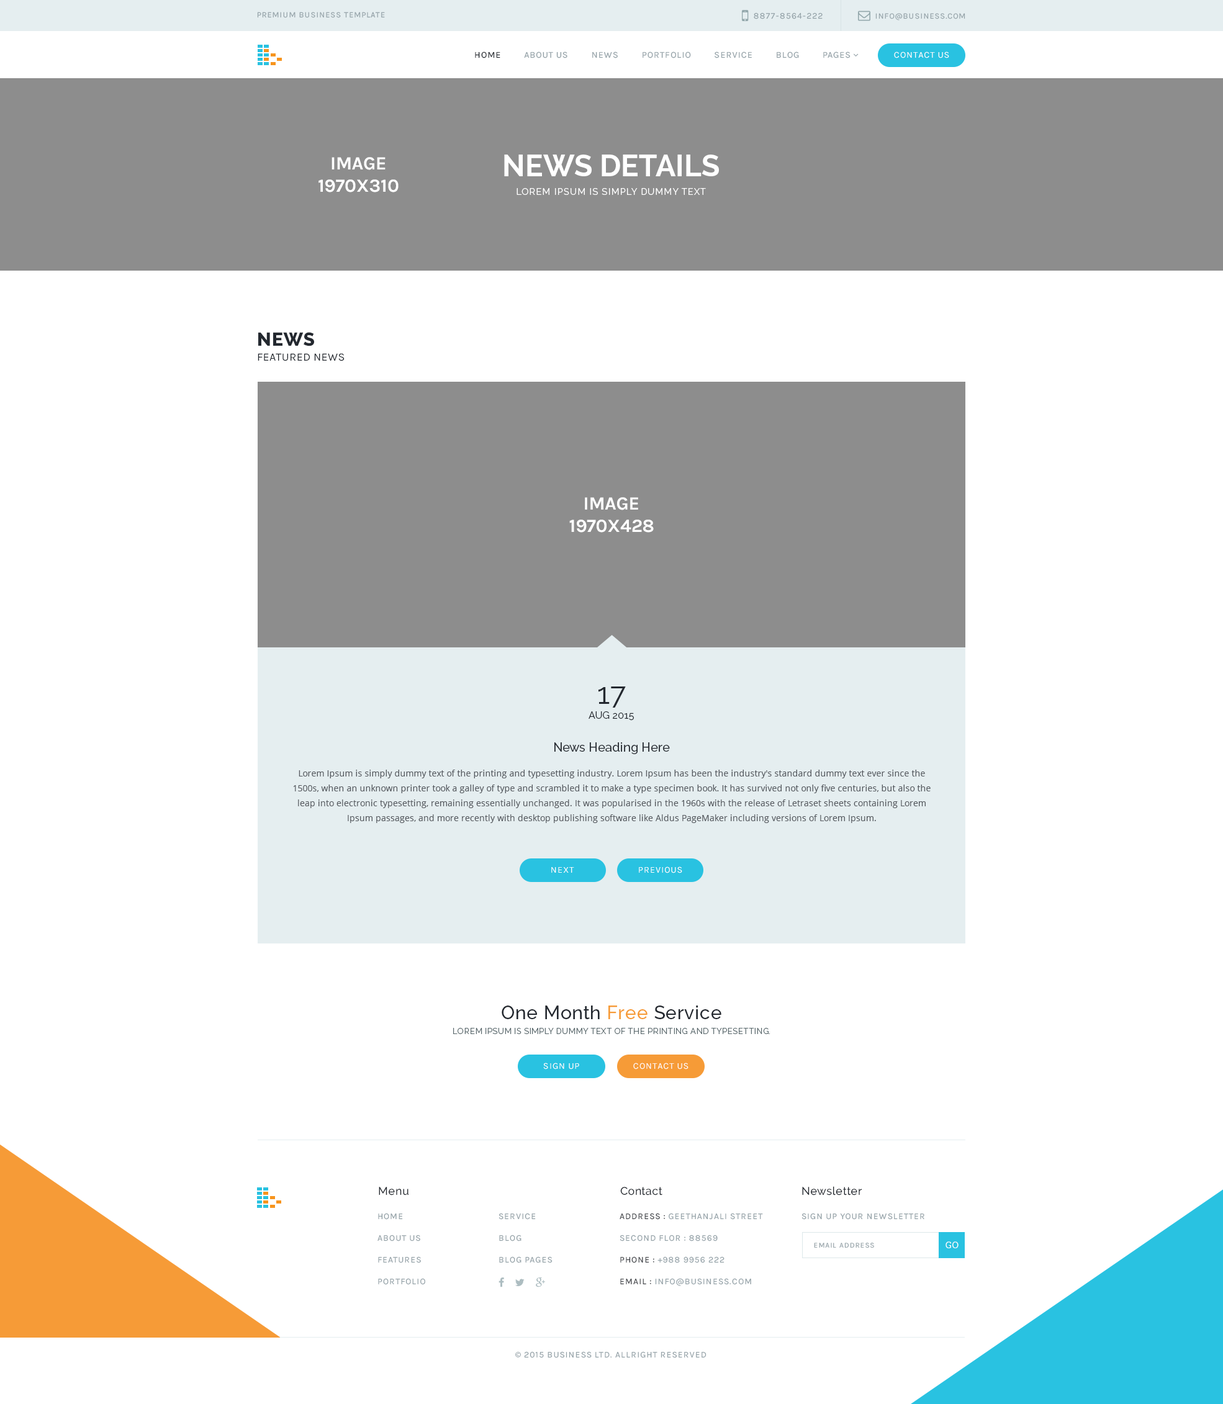
<style>
.page{position:relative;width:1223px;height:1404px;background:#ffffff}
.page>*{position:absolute;margin:0}
.t1{font:8.1px "Karla-Regular";letter-spacing:0.075em;color:#93a1a7;text-transform:uppercase}
.t2{font:8.7px "Karla-Regular";letter-spacing:0.075em;color:#93a1a7;text-transform:uppercase}
.t3{font:9px "Karla-Regular";letter-spacing:0.075em;color:#93a1a7;text-transform:uppercase}
.t4{font:9px "Karla-Regular";letter-spacing:0.075em;color:#23282f;text-transform:uppercase}
.t5{font:9px "Karla-Regular";letter-spacing:0.075em;color:#ffffff;text-transform:uppercase}
.t6{font:18.6px "Karla-Bold";letter-spacing:-0.01em;color:#ffffff;text-transform:uppercase}
.t7{font:9px/18.6px "Raleway-Regular";letter-spacing:0.075em;color:#ffffff;text-transform:uppercase}
.t8{font:29.8px/18.6px "Raleway-Bold";color:#ffffff;text-transform:uppercase}
.t9{font:11.2px/14.9px "Karla-Regular";letter-spacing:0.025em;color:#23282f;text-transform:uppercase}
.t10{font:18.6px/14.9px "Raleway-ExtraBold";letter-spacing:0.025em;color:#23282f;text-transform:uppercase}
.t11{font:9.9px/14.9px "Raleway-Regular";color:#23282f;text-transform:uppercase}
.t12{font:29.8px/14.9px "Raleway-Regular";color:#23282f}
.t13{font:12.4px "Raleway-Medium";color:#23282f}
.t14{font:8.7px/14.9px "OpenSans";color:#55595f}
.t15{font:8.1px/14.9px "Raleway-Regular";letter-spacing:0.05em;color:#59686c;text-transform:uppercase}
.t16{font:18.6px/14.9px "Raleway-Medium";letter-spacing:0.025em;color:#23282f}
.t17{font:18.6px/14.9px "Raleway-Medium";letter-spacing:0.025em;color:#f69b37}
.t18{font:11.2px "Raleway-Medium";letter-spacing:0.025em;color:#23282f}
.t19{font:8.7px/21.7px "Karla-Regular";letter-spacing:0.075em;color:#93a1a7;text-transform:uppercase}
.t20{font:8.7px/21.7px "Karla-Regular";letter-spacing:0.075em;color:#3e4146;text-transform:uppercase}
.t21{font:9.3px "RobotoSlab-Regular";letter-spacing:0.025em;color:#ffffff}
.t22{font:7.4px "Karla-Regular";letter-spacing:0.075em;color:#93a1a7;text-transform:uppercase}
.t23{font:8.7px "MyriadPro-Regular";letter-spacing:0.075em;color:#93a1a7;text-transform:uppercase}
</style>
<div class="page">
<p class="t1" style="left:257px;top:12px;width:128px;height:6px">premium business template</p>
<p class="t2" style="left:754px;top:12px;width:68px;height:7px">8877-8564-222</p>
<p class="t1" style="left:875px;top:13px;width:90px;height:7px">info@business.com</p>
<p class="t3" style="left:475px;top:52px;width:375px;height:6px"><span class="t4">Home         </span>About Us         News         Portfolio         Service         Blog         Pages</p>
<p class="t5" style="left:894px;top:52px;width:55px;height:6px">Contact Us</p>
<p class="t6" style="left:318px;top:157px;width:80px;height:35px;text-align:center">Image<br>1970x310</p>
<p class="t7" style="left:504px;top:155px;width:215px;height:40px;text-align:center"><span class="t8">News Details<br></span>Lorem Ipsum is simply dummy text</p>
<p class="t9" style="left:258px;top:332px;width:86px;height:29px"><span class="t10">News<br></span>Featured News</p>
<p class="t6" style="left:569px;top:497px;width:85px;height:36px;text-align:center">Image<br>1970x428</p>
<p class="t11" style="left:588px;top:686px;width:46px;height:35px;text-align:center"><span class="t12">17<br></span>aug 2015</p>
<p class="t13" style="left:554px;top:742px;width:116px;height:12px">News Heading Here</p>
<p class="t14" style="left:293px;top:770px;width:637px;height:53px;text-align:center">Lorem Ipsum is simply dummy text of the printing and typesetting industry. Lorem Ipsum has been the industry's standard dummy text ever since the 1500s, when an unknown printer took a galley of type and scrambled it to make a type specimen book. It has survived not only five centuries, but also the leap into electronic typesetting, remaining essentially unchanged. It was popularised in the 1960s with the release of Letraset sheets containing Lorem Ipsum passages, and more recently with desktop publishing software like Aldus PageMaker including versions of Lorem Ipsum.</p>
<p class="t5" style="left:551px;top:867px;width:23px;height:6px">Next</p>
<p class="t5" style="left:639px;top:866px;width:43px;height:7px">Previous</p>
<p class="t15" style="left:453px;top:1006px;width:317px;height:28px;text-align:center"><span class="t16">One Month </span><span class="t17">Free</span><span class="t16"> Service<br></span>Lorem Ipsum is simply dummy text of the printing and typesetting.</p>
<p class="t5" style="left:543px;top:1063px;width:36px;height:6px">Sign up</p>
<p class="t5" style="left:633px;top:1063px;width:55px;height:6px">Contact us</p>
<p class="t18" style="left:379px;top:1187px;width:29px;height:8px">Menu</p>
<p class="t18" style="left:620px;top:1187px;width:42px;height:8px">Contact</p>
<p class="t18" style="left:802px;top:1186px;width:60px;height:9px">Newsletter</p>
<p class="t19" style="left:377px;top:1213px;width:48px;height:72px">Home<br>About Us<br>Features<br>Portfolio</p>
<p class="t19" style="left:498px;top:1213px;width:54px;height:50px">Service<br>Blog<br>Blog Pages</p>
<p class="t19" style="left:619px;top:1213px;width:144px;height:73px"><span class="t20">Address : </span>Geethanjali street<br>Second flor : 88569<br><span class="t20">Phone :</span> +988 9956 222<br><span class="t20">Email :</span> info@business.com</p>
<p class="t2" style="left:801px;top:1213px;width:123px;height:7px">Sign up your newsletter</p>
<p class="t21" style="left:945px;top:1241px;width:13px;height:8px">GO</p>
<p class="t22" style="left:814px;top:1243px;width:60px;height:5px">Email Address</p>
<p class="t2" style="left:515px;top:1351px;width:191px;height:7px"><span class="t23">©</span> 2015 business Ltd. allright reserved</p>
</div>
